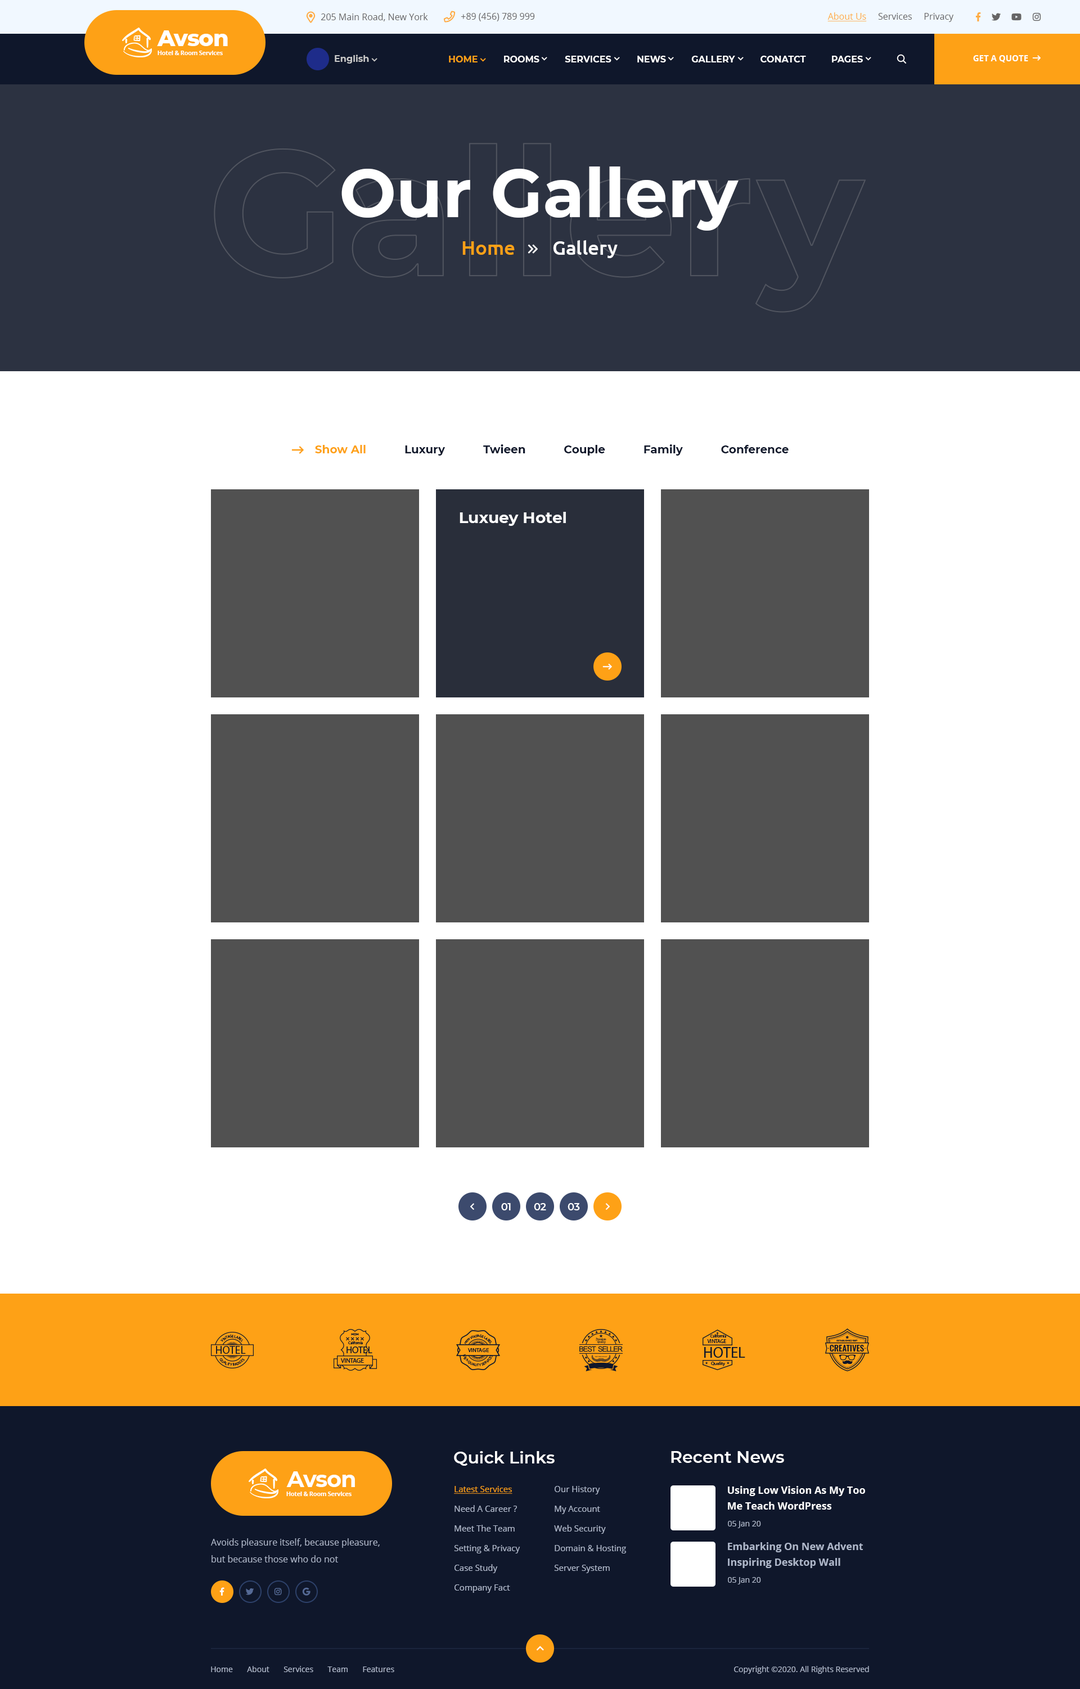
<style>
.page{position:relative;width:1080px;height:1689px;background:#ffffff}
.page>*{position:absolute;margin:0}
.t1{font:9px "OpenSans-Regular";color:#666565}
.t2{font:9px "OpenSans-Regular";color:#ffac41;text-decoration:underline}
.t3{font:22.5px "Montserrat-ExtraBold";letter-spacing:-0.03em;color:#ffffff}
.t4{font:6.2px "OpenSans-Bold";letter-spacing:-0.03em;color:#ffffff}
.t5{font:9px "Montserrat-Bold";color:#c8c8c8}
.t6{font:9px "Montserrat-Bold";color:#ffffff;text-transform:uppercase}
.t7{font:9px "Montserrat-Bold";color:#fea116;text-transform:uppercase}
.t8{font:8.4px "OpenSans-Bold";color:#ffffff;text-transform:uppercase}
.t9{font:67.5px "Montserrat-Bold";color:#ffffff}
.t10{font:19.7px "Ubuntu-Medium";color:#ffffff}
.t11{font:19.7px "Ubuntu-Medium";color:#fea116}
.t12{font:11.2px "Montserrat-Bold";color:#0f172b}
.t13{font:11.2px "Montserrat-Bold";color:#fea116}
.t14{font:15.8px "Montserrat-Bold";color:#ffffff}
.t15{font:10.1px "Montserrat-SemiBold";letter-spacing:-0.03em;color:#ffffff}
.t16{font:16.9px "Montserrat-SemiBold";color:#ffffff}
.t17{font:22.5px "Montserrat-Bold";letter-spacing:-0.03em;color:#ffffff}
.t18{font:8.4px/19.7px "OpenSans-Regular";color:#aeb7ca}
.t19{font:8.4px/19.7px "OpenSans-Regular";color:#fea116;text-decoration:underline}
.t20{font:10.1px/15.8px "OpenSans-Bold";color:#ffffff}
.t21{font:7.9px "OpenSans-Regular";color:#aeb7ca}
.t22{font:9px/16.9px "OpenSans-Regular";color:#aeb7ca}
.t23{font:10.1px/15.8px "OpenSans-Bold";color:#aeb7ca}
</style>
<div class="page">
<p class="t1" style="left:321px;top:13px;width:107px;height:8px">205 Main Road, New York</p>
<p class="t1" style="left:461px;top:13px;width:74px;height:8px">+89 (456) 789 999</p>
<p class="t1" style="left:827px;top:12px;width:126px;height:10px"><span class="t2">About Us</span>     Services     Privacy</p>
<p class="t3" style="left:157px;top:30px;width:71px;height:16px">Avson</p>
<p class="t4" style="left:158px;top:51px;width:65px;height:4px">Hotel &amp; Room Services</p>
<p class="t5" style="left:335px;top:55px;width:34px;height:9px">English</p>
<p class="t6" style="left:449px;top:56px;width:414px;height:6px"><span class="t7">HOME</span>          Rooms          Services          News          gallery          Conatct          Pages</p>
<p class="t8" style="left:973px;top:55px;width:55px;height:7px">Get a quote</p>
<p class="t9" style="left:341px;top:166px;width:398px;height:65px">Our Gallery</p>
<p class="t10" style="left:462px;top:240px;width:156px;height:18px"><span class="t11">Home</span>        Gallery</p>
<p class="t12" style="left:315px;top:444px;width:474px;height:12px"><span class="t13">Show All</span>            Luxury            Twieen            Couple            Family            Conference</p>
<p class="t14" style="left:460px;top:512px;width:106px;height:14px">Luxuey Hotel</p>
<p class="t15" style="left:501px;top:1203px;width:10px;height:7px">01</p>
<p class="t15" style="left:534px;top:1203px;width:12px;height:7px">02</p>
<p class="t15" style="left:568px;top:1203px;width:12px;height:7px">03</p>
<p class="t16" style="left:454px;top:1451px;width:101px;height:15px">Quick Links</p>
<p class="t16" style="left:671px;top:1451px;width:113px;height:12px">Recent News</p>
<p class="t17" style="left:286px;top:1472px;width:69px;height:15px">Avson</p>
<p class="t4" style="left:286px;top:1492px;width:66px;height:4px">Hotel &amp; Room Services</p>
<p class="t18" style="left:454px;top:1486px;width:66px;height:107px"><span class="t19">Latest Services<br></span>Need A Career ?<br>Meet The Team<br>Setting &amp; Privacy<br>Case Study<br>Company Fact</p>
<p class="t18" style="left:554px;top:1486px;width:72px;height:87px">Our History<br>My Account<br>Web Security<br>Domain &amp; Hosting<br>Server System</p>
<p class="t20" style="left:728px;top:1486px;width:137px;height:24px">Using Low Vision As My Too<br>Me Teach WordPress</p>
<p class="t21" style="left:728px;top:1521px;width:33px;height:7px">05 Jan 20</p>
<p class="t22" style="left:211px;top:1538px;width:169px;height:25px">Avoids pleasure itself, because pleasure, <br>but because those who do not</p>
<p class="t23" style="left:728px;top:1542px;width:135px;height:26px">Embarking On New Advent<br>Inspiring Desktop Wall</p>
<p class="t21" style="left:728px;top:1577px;width:33px;height:8px">05 Jan 20</p>
<p class="t21" style="left:211px;top:1666px;width:183px;height:6px">Home       About       Services       Team       Features</p>
<p class="t21" style="left:734px;top:1666px;width:135px;height:8px">Copyright ©2020. All Rights Reserved</p>
</div>
